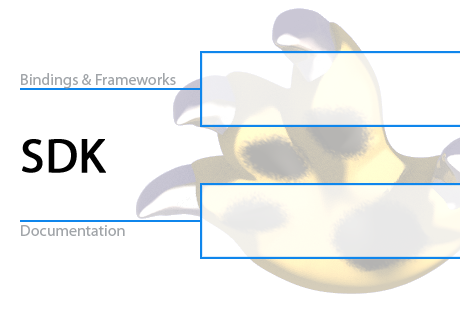
<style>
.page{position:relative;width:460px;height:310px;background:#ffffff}
.page>*{position:absolute;margin:0}
.t1{font:16px "Myriad-Roman";color:#a1a5a9}
.t2{font:48px "Myriad-Roman";color:#000000;font-weight:bold}
</style>
<div class="page">
<p class="t1" style="left:21px;top:73px;width:155px;height:16px">Bindings &amp; Frameworks</p>
<p class="t2" style="left:22px;top:139px;width:84px;height:34px">SDK</p>
<p class="t1" style="left:21px;top:225px;width:104px;height:11px">Documentation</p>
</div>
